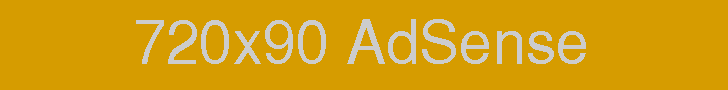
<style>
.page{position:relative;width:728px;height:90px;background:#d69c00}
.page>*{position:absolute;margin:0}
.t1{font:60px "SansSerif";color:#cccccc}
</style>
<div class="page">
<p class="t1" style="left:136px;top:19px;width:450px;height:45px">720x90 AdSense</p>
</div>
